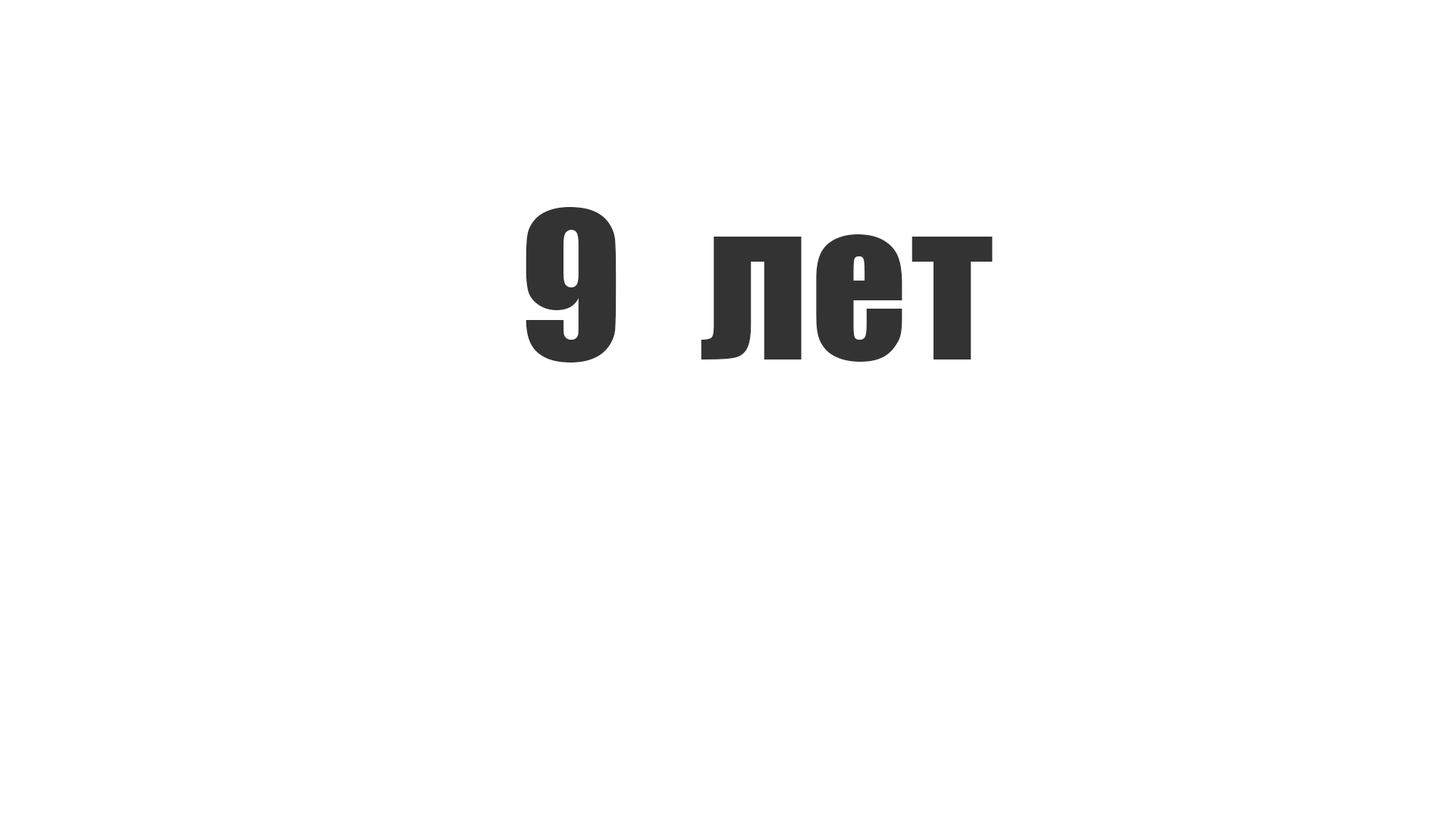
<style>
.page{position:relative;width:1456px;height:819px;background:#ffffff}
.page>*{position:absolute;margin:0}
.t1{font:189.6px "Impact";letter-spacing:0.02em;color:#333333}
</style>
<div class="page">
<p class="t1" style="left:526px;top:207px;width:467px;height:155px">9  лет</p>
</div>
